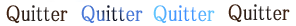
<style>
.page{position:relative;width:296px;height:26px;background:#ffffff}
.page>*{position:absolute;margin:0}
.t1{font:22.8px "MS-PMincho";color:#2f2018;font-weight:bold;scale:0.84 1}
.t2{font:22.8px "MS-PMincho";font-weight:bold;scale:0.84 1}
</style>
<div class="page">
<p class="t1" style="left:6px;top:5px;width:62px;height:18px">Quitter</p>
<p class="t2" style="left:81px;top:5px;width:62px;height:18px">Quitter</p>
<p class="t2" style="left:153px;top:5px;width:62px;height:18px">Quitter</p>
<p class="t1" style="left:228px;top:4px;width:62px;height:18px">Quitter</p>
</div>
